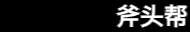
<style>
.page{position:relative;width:190px;height:32px;background:#000000}
.page>*{position:absolute;margin:0}
.t1{font:24px "WebPSD-18463539-0-Regular";color:#ffffff;font-weight:bold}
</style>
<div class="page">
<p class="t1" style="left:0px;top:0px;width:190px;height:32px">斧头帮</p>
</div>
